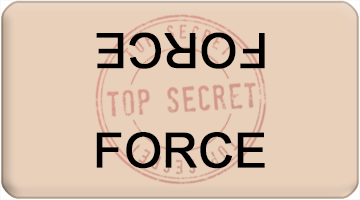
<style>
.page{position:relative;width:360px;height:200px;background:#e8d0bb}
.page>*{position:absolute;margin:0}
.t1{font:48px "ArialMT";color:#000000;font-weight:bold}
</style>
<div class="page">
<p class="t1" style="left:96px;top:32px;width:169px;height:37px;rotate:180deg">FORCE</p>
<p class="t1" style="left:96px;top:132px;width:169px;height:37px">FORCE</p>
</div>
